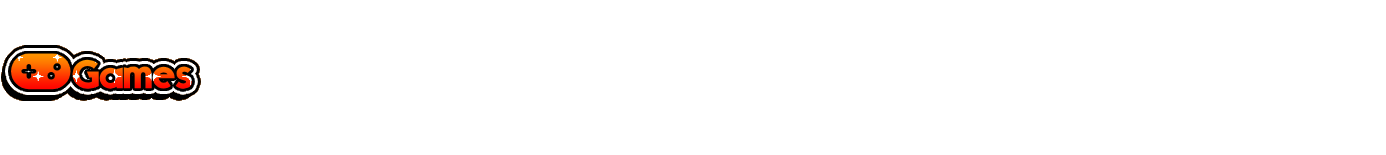
<style>
.page{position:relative;width:1386px;height:155px;background:#ffffff}
.page>*{position:absolute;margin:0}
.t1{font:40px "Mouser"}
</style>
<div class="page">
<p class="t1" style="left:72px;top:59px;width:120px;height:30px">Games</p>
<p class="t1" style="left:72px;top:59px;width:120px;height:30px">Games</p>
</div>
